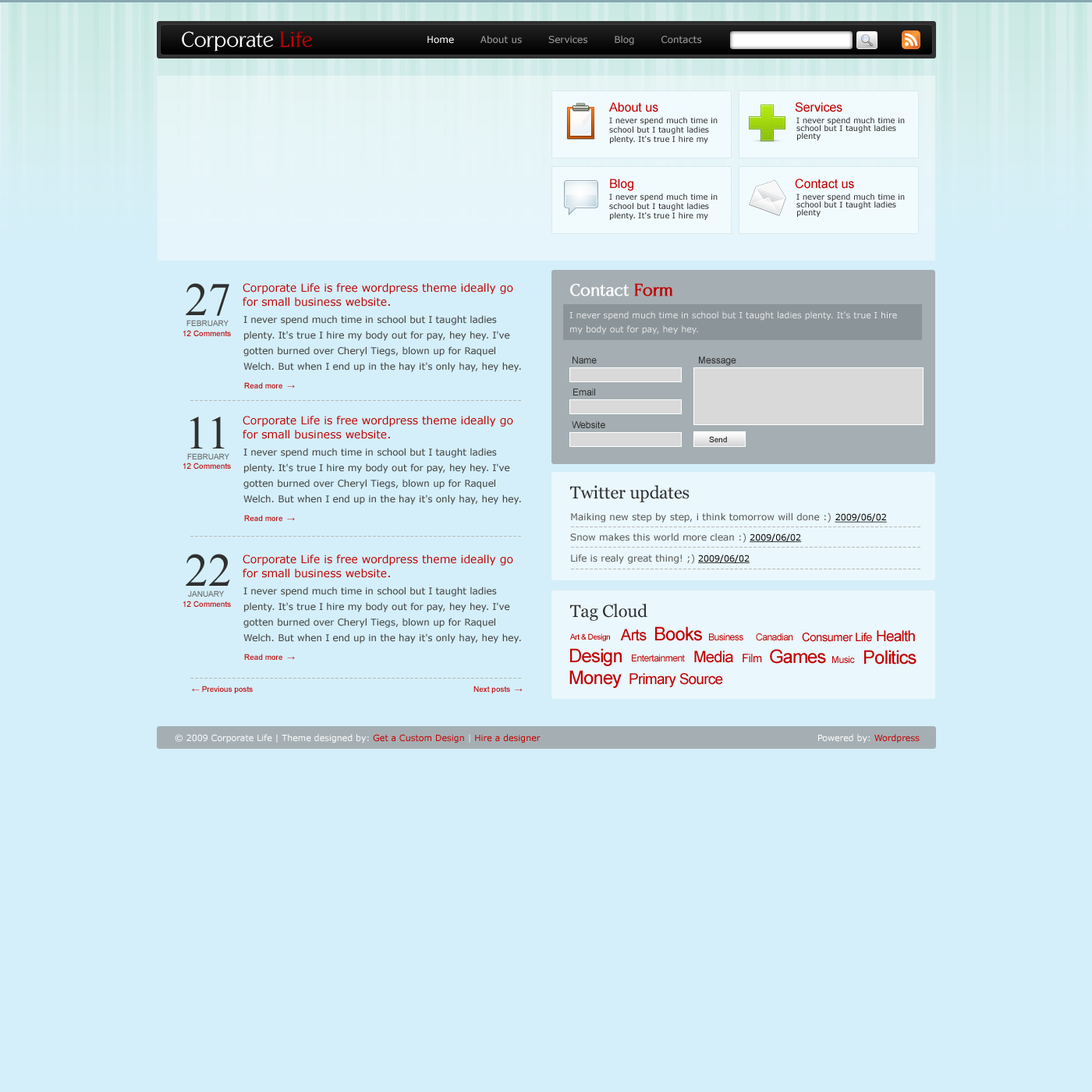
<style>
.page{position:relative;width:1092px;height:1092px;background:#d4eff9}
.page>*{position:absolute;margin:0}
.t1{font:21.8px "CentabelBook";color:#ffffff}
.t2{font:21.8px "CentabelBook";color:#c00000}
.t3{font:9.4px "Verdana";color:#9a9a9a}
.t4{font:9.4px "Verdana";color:#ffffff}
.t5{font:12.5px "ArialMT";color:#c00000}
.t6{font:7.8px/9.4px "Verdana";color:#303030}
.t7{font:7.8px/7.8px "Verdana";color:#303030}
.t8{font:46.8px "TimesNewRomanPSMT";color:#303030}
.t9{font:10.9px/14px "Verdana";color:#c00000}
.t10{font:17.2px "CentabelBook";color:#ffffff;font-weight:bold}
.t11{font:17.2px "CentabelBook";color:#c00000;font-weight:bold}
.t12{font:9.4px/15.6px "Verdana";color:#494949}
.t13{font:8.6px/14px "Verdana";color:#e6e6e6}
.t14{font:7.8px "ArialMT";color:#c00000}
.t15{font:7.8px "ArialMT";color:#696969;text-transform:uppercase}
.t16{font:9.4px "ArialMT";color:#2c2c2c}
.t17{font:7.8px "ArialMT";color:#1b1b1b}
.t18{font:17.2px "Georgia";color:#303030}
.t19{font:9.4px "Verdana";color:#616160}
.t20{font:8.6px "Verdana";color:#000000;text-decoration:underline}
.t21{font:15.6px "ArialMT";letter-spacing:-0.04em;color:#c00000}
.t22{font:18.7px "ArialMT";letter-spacing:-0.04em;color:#c00000}
.t23{font:7.8px "ArialMT";letter-spacing:-0.04em;color:#c00000}
.t24{font:9.4px "ArialMT";letter-spacing:-0.04em;color:#c00000}
.t25{font:11.7px "ArialMT";letter-spacing:-0.04em;color:#c00000}
.t26{font:14.8px "ArialMT";letter-spacing:-0.04em;color:#c00000}
.t27{font:8.6px "Verdana";color:#ffffff}
.t28{font:8.6px "Verdana";color:#c00000}
.t29{font:8.6px "Verdana";color:#d9ebf1}
</style>
<div class="page">
<p class="t1" style="left:182px;top:31px;width:131px;height:20px">Corporate <span class="t2">Life</span></p>
<p class="t3" style="left:427px;top:35px;width:275px;height:10px"><span class="t4">Home        </span>About us        Services        Blog        Contacts</p>
<p class="t5" style="left:609px;top:102px;width:49px;height:10px">About us</p>
<p class="t5" style="left:795px;top:102px;width:47px;height:10px">Services</p>
<p class="t6" style="left:609px;top:117px;width:109px;height:27px">I never spend much time in school but I taught ladies plenty. It's true I hire my</p>
<p class="t7" style="left:796px;top:117px;width:109px;height:23px">I never spend much time in school but I taught ladies plenty</p>
<p class="t5" style="left:610px;top:179px;width:23px;height:12px">Blog</p>
<p class="t5" style="left:795px;top:179px;width:59px;height:10px">Contact us</p>
<p class="t6" style="left:609px;top:193px;width:109px;height:27px">I never spend much time in school but I taught ladies plenty. It's true I hire my</p>
<p class="t7" style="left:796px;top:193px;width:109px;height:24px">I never spend much time in school but I taught ladies plenty</p>
<p class="t8" style="left:186px;top:283px;width:43px;height:33px">27</p>
<p class="t9" style="left:243px;top:283px;width:270px;height:24px">Corporate Life is free wordpress theme ideally go <br>for small business website.</p>
<p class="t10" style="left:570px;top:283px;width:103px;height:13px">Contact <span class="t11">Form</span></p>
<p class="t12" style="left:243px;top:315px;width:278px;height:57px">I never spend much time in school but I taught ladies plenty. It's true I hire my body out for pay, hey hey. I've gotten burned over Cheryl Tiegs, blown up for Raquel Welch. But when I end up in the hay it's only hay, hey hey.</p>
<p class="t13" style="left:569px;top:311px;width:328px;height:24px">I never spend much time in school but I taught ladies plenty. It's true I hire <br>my body out for pay, hey hey.</p>
<p class="t14" style="left:183px;top:330px;width:48px;height:6px">12 Comments</p>
<p class="t15" style="left:186px;top:320px;width:43px;height:6px">February</p>
<p class="t16" style="left:573px;top:356px;width:24px;height:7px">Name</p>
<p class="t14" style="left:244px;top:382px;width:51px;height:6px">Read more  →</p>
<p class="t16" style="left:573px;top:388px;width:22px;height:7px">Email</p>
<p class="t8" style="left:190px;top:417px;width:35px;height:31px">11</p>
<p class="t9" style="left:243px;top:416px;width:270px;height:23px">Corporate Life is free wordpress theme ideally go <br>for small business website.</p>
<p class="t16" style="left:572px;top:421px;width:33px;height:7px">Website</p>
<p class="t17" style="left:709px;top:436px;width:18px;height:6px">Send</p>
<p class="t12" style="left:243px;top:448px;width:278px;height:57px">I never spend much time in school but I taught ladies plenty. It's true I hire my body out for pay, hey hey. I've gotten burned over Cheryl Tiegs, blown up for Raquel Welch. But when I end up in the hay it's only hay, hey hey.</p>
<p class="t15" style="left:187px;top:453px;width:42px;height:6px">February</p>
<p class="t14" style="left:183px;top:463px;width:48px;height:6px">12 Comments</p>
<p class="t18" style="left:570px;top:485px;width:120px;height:17px">Twitter updates</p>
<p class="t14" style="left:244px;top:515px;width:51px;height:6px">Read more  →</p>
<p class="t19" style="left:571px;top:512px;width:316px;height:11px">Maiking new step by step, i think tomorrow will done :) <span class="t20">2009/06/02</span></p>
<p class="t19" style="left:570px;top:533px;width:232px;height:10px">Snow makes this world more clean :) <span class="t20">2009/06/02</span></p>
<p class="t8" style="left:186px;top:554px;width:44px;height:32px">22</p>
<p class="t9" style="left:243px;top:555px;width:270px;height:23px">Corporate Life is free wordpress theme ideally go <br>for small business website.</p>
<p class="t19" style="left:571px;top:554px;width:179px;height:10px">Life is realy great thing! ;) <span class="t20">2009/06/02</span></p>
<p class="t15" style="left:188px;top:590px;width:37px;height:7px">January</p>
<p class="t12" style="left:243px;top:587px;width:278px;height:56px">I never spend much time in school but I taught ladies plenty. It's true I hire my body out for pay, hey hey. I've gotten burned over Cheryl Tiegs, blown up for Raquel Welch. But when I end up in the hay it's only hay, hey hey.</p>
<p class="t14" style="left:183px;top:601px;width:48px;height:6px">12 Comments</p>
<p class="t18" style="left:570px;top:604px;width:77px;height:17px">Tag Cloud</p>
<p class="t21" style="left:620px;top:629px;width:27px;height:12px">Arts</p>
<p class="t22" style="left:655px;top:626px;width:47px;height:15px">Books</p>
<p class="t23" style="left:570px;top:633px;width:40px;height:8px">Art &amp; Design</p>
<p class="t24" style="left:709px;top:633px;width:34px;height:7px">Business</p>
<p class="t24" style="left:756px;top:633px;width:37px;height:8px">Canadian</p>
<p class="t25" style="left:802px;top:633px;width:70px;height:9px">Consumer Life</p>
<p class="t26" style="left:877px;top:630px;width:38px;height:12px">Health</p>
<p class="t14" style="left:244px;top:654px;width:51px;height:6px">Read more  →</p>
<p class="t22" style="left:570px;top:648px;width:52px;height:18px">Design</p>
<p class="t21" style="left:694px;top:651px;width:39px;height:12px">Media</p>
<p class="t25" style="left:743px;top:654px;width:19px;height:8px">Film</p>
<p class="t22" style="left:770px;top:649px;width:56px;height:15px">Games</p>
<p class="t22" style="left:864px;top:650px;width:52px;height:15px">Politics</p>
<p class="t24" style="left:632px;top:654px;width:53px;height:7px">Entertainment</p>
<p class="t24" style="left:832px;top:656px;width:23px;height:7px">Music</p>
<p class="t22" style="left:569px;top:670px;width:53px;height:18px">Money</p>
<p class="t26" style="left:629px;top:673px;width:94px;height:14px">Primary Source</p>
<p class="t14" style="left:192px;top:686px;width:61px;height:7px">← Previous posts</p>
<p class="t14" style="left:473px;top:686px;width:50px;height:7px">Next posts  →</p>
<p class="t27" style="left:175px;top:734px;width:366px;height:9px">© 2009 Corporate Life | Theme designed by: <span class="t28">Get a Custom Design</span><span class="t29"> | </span><span class="t28">Hire a designer</span></p>
<p class="t27" style="left:818px;top:734px;width:102px;height:9px">Powered by: <span class="t28">Wordpress</span></p>
</div>
